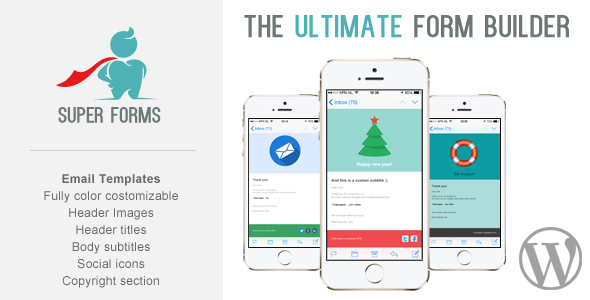
<style>
.page{position:relative;width:590px;height:300px;background:#f2f2f2}
.page>*{position:absolute;margin:0}
.t1{font:31.7px "Kenzo";letter-spacing:0.025em;color:#6c7776}
.t2{font:31.7px "Kenzo";letter-spacing:0.025em;color:#4eb1b6}
.t3{font:12px/17px "ArialMT";letter-spacing:0.025em;color:#6a6a6a}
.t4{font:12px/17px "Arial-BoldMT";letter-spacing:0.025em;color:#6a6a6a}
</style>
<div class="page">
<p class="t1" style="left:244px;top:15px;width:325px;height:23px">The <span class="t2">ultimate</span> form builder</p>
<p class="t3" style="left:44px;top:174px;width:134px;height:114px;text-align:center"><span class="t4">Email Templates<br></span>Fully color costomizable<br>Header Images<br>Header titles<br>Body subtitles<br>Social icons<br>Copyright section</p>
</div>
